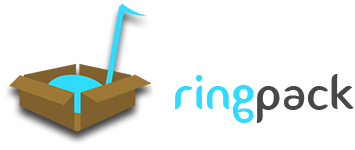
<style>
.page{position:relative;width:355px;height:150px;background:#ffffff}
.page>*{position:absolute;margin:0}
.t1{font:48px "Fontastique";color:#31dbff}
.t2{font:48px "Fontastique";color:#484848}
</style>
<div class="page">
<p class="t1" style="left:174px;top:74px;width:180px;height:49px">ring<span class="t2">pack</span></p>
</div>
